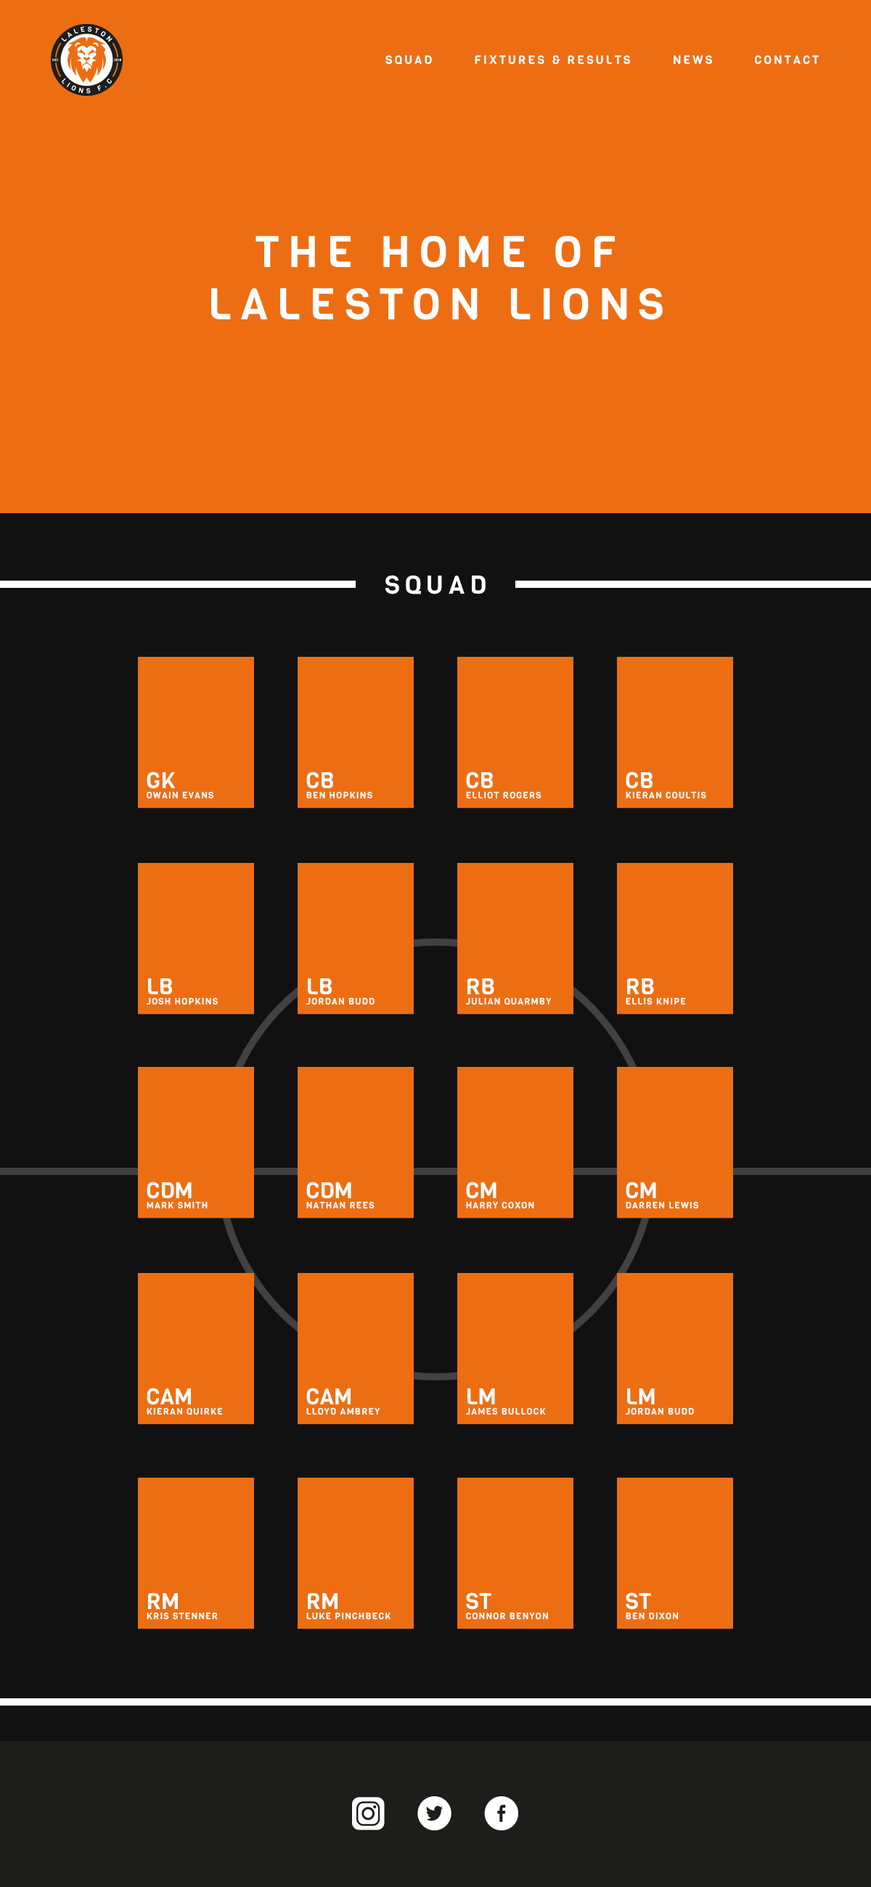
<style>
.page{position:relative;width:871px;height:1887px;background:#ed6e12}
.page>*{position:absolute;margin:0}
.t1{font:11.6px "Viga-Regular";letter-spacing:0.2em;color:#ffffff;text-transform:uppercase}
.t2{font:43.6px "Viga-Regular";letter-spacing:0.2em;color:#ffffff}
.t3{font:25.4px "Viga-Regular";letter-spacing:0.2em;color:#ffffff}
.t4{font:9px "Viga-Regular";letter-spacing:0.1em;color:#ffffff}
.t5{font:22.5px "Viga-Regular";color:#ffffff}
</style>
<div class="page">
<p class="t1" style="left:385px;top:55px;width:434px;height:10px">SQUAD        FIXTURES &amp; RESULTS        NEWS        CONTACT</p>
<p class="t2" style="left:211px;top:236px;width:452px;height:84px;text-align:center">THE HOME OF <br>LALESTON LIONS</p>
<p class="t3" style="left:385px;top:575px;width:101px;height:20px">SQUAD</p>
<p class="t4" style="left:147px;top:772px;width:66px;height:27px"><span class="t5">GK<br></span>OWAIN EVANS</p>
<p class="t4" style="left:306px;top:772px;width:66px;height:27px"><span class="t5">CB<br></span>BEN HOPKINS</p>
<p class="t4" style="left:466px;top:772px;width:76px;height:27px"><span class="t5">CB<br></span>ELLIOT ROGERS</p>
<p class="t4" style="left:626px;top:772px;width:80px;height:27px"><span class="t5">CB<br></span>KIERAN COULTIS</p>
<p class="t4" style="left:146px;top:979px;width:72px;height:26px"><span class="t5">LB<br></span>JOSH HOPKINS</p>
<p class="t4" style="left:306px;top:979px;width:69px;height:26px"><span class="t5">LB<br></span>JORDAN BUDD</p>
<p class="t4" style="left:465px;top:979px;width:87px;height:26px"><span class="t5">RB<br></span>JULIAN QUARMBY</p>
<p class="t4" style="left:626px;top:979px;width:60px;height:26px"><span class="t5">RB<br></span>ELLIS KNIPE</p>
<p class="t4" style="left:147px;top:1182px;width:61px;height:27px"><span class="t5">CDM<br></span>MARK SMITH</p>
<p class="t4" style="left:306px;top:1182px;width:69px;height:27px"><span class="t5">CDM<br></span>NATHAN REES</p>
<p class="t4" style="left:466px;top:1182px;width:68px;height:27px"><span class="t5">CM<br></span>HARRY COXON</p>
<p class="t4" style="left:626px;top:1182px;width:72px;height:27px"><span class="t5">CM<br></span>DARREN LEWIS</p>
<p class="t4" style="left:147px;top:1388px;width:76px;height:28px"><span class="t5">CAM<br></span>KIERAN QUIRKE</p>
<p class="t4" style="left:306px;top:1388px;width:74px;height:28px"><span class="t5">CAM<br></span>LLOYD AMBREY</p>
<p class="t4" style="left:465px;top:1389px;width:81px;height:27px"><span class="t5">LM<br></span>JAMES BULLOCK</p>
<p class="t4" style="left:625px;top:1389px;width:69px;height:27px"><span class="t5">LM<br></span>JORDAN BUDD</p>
<p class="t4" style="left:147px;top:1593px;width:71px;height:27px"><span class="t5">RM<br></span>KRIS STENNER</p>
<p class="t4" style="left:306px;top:1593px;width:85px;height:27px"><span class="t5">RM<br></span>LUKE PINCHBECK</p>
<p class="t4" style="left:466px;top:1593px;width:82px;height:27px"><span class="t5">ST<br></span>CONNOR BENYON</p>
<p class="t4" style="left:626px;top:1593px;width:53px;height:27px"><span class="t5">ST<br></span>BEN DIXON</p>
</div>
